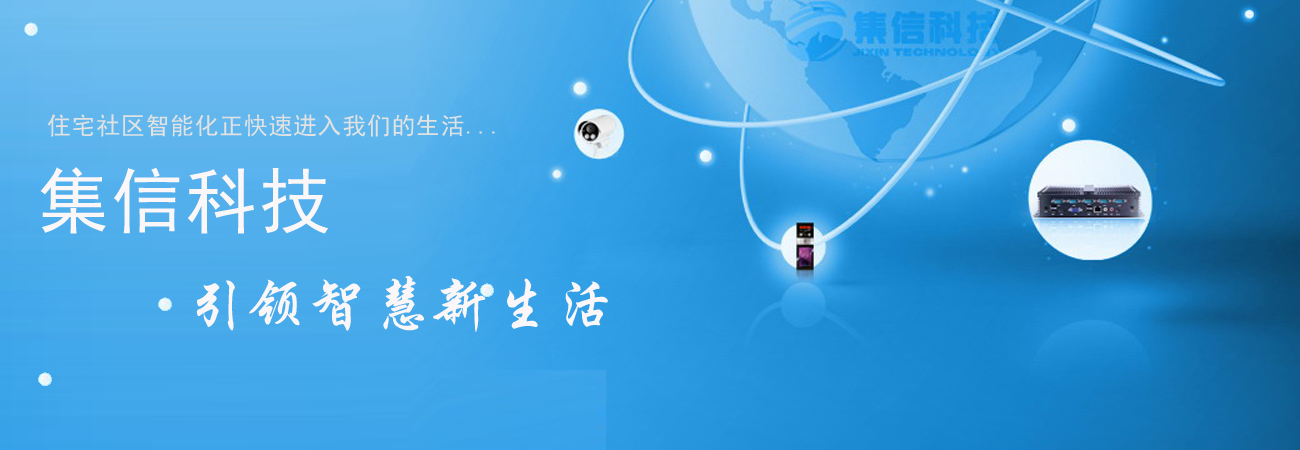
<style>
.page{position:relative;width:1300px;height:450px}
.page>*{position:absolute;margin:0}
.t1{font:24px "SimHei";letter-spacing:0.025em;color:#e2e2e2}
.t2{font:72px "SimHei";letter-spacing:0.025em;color:#fbf7f8}
.t3{font:60px "FZXKJW--GB1-0";letter-spacing:0.025em;color:#fbf7f8}
</style>
<div class="page">
<p class="t1" style="left:47px;top:114px;width:448px;height:23px">住宅社区智能化正快速进入我们的生活...</p>
<p class="t2" style="left:40px;top:167px;width:288px;height:67px">集信科技</p>
<p class="t3" style="left:196px;top:276px;width:412px;height:56px">引领智慧新生活</p>
</div>
